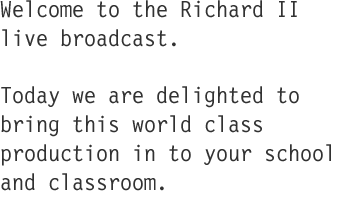
<style>
.page{position:relative;width:350px;height:221px;background:#ffffff}
.page>*{position:absolute;margin:0}
.t1{font:24px "LetterGothic12PitchBT-Roman";color:#323232}
</style>
<div class="page">
<p class="t1" style="left:0px;top:0px;width:331px;height:191px">Welcome to the Richard II live broadcast.<br><br>Today we are delighted to bring this world class <br>production in to your school and classroom.</p>
</div>
